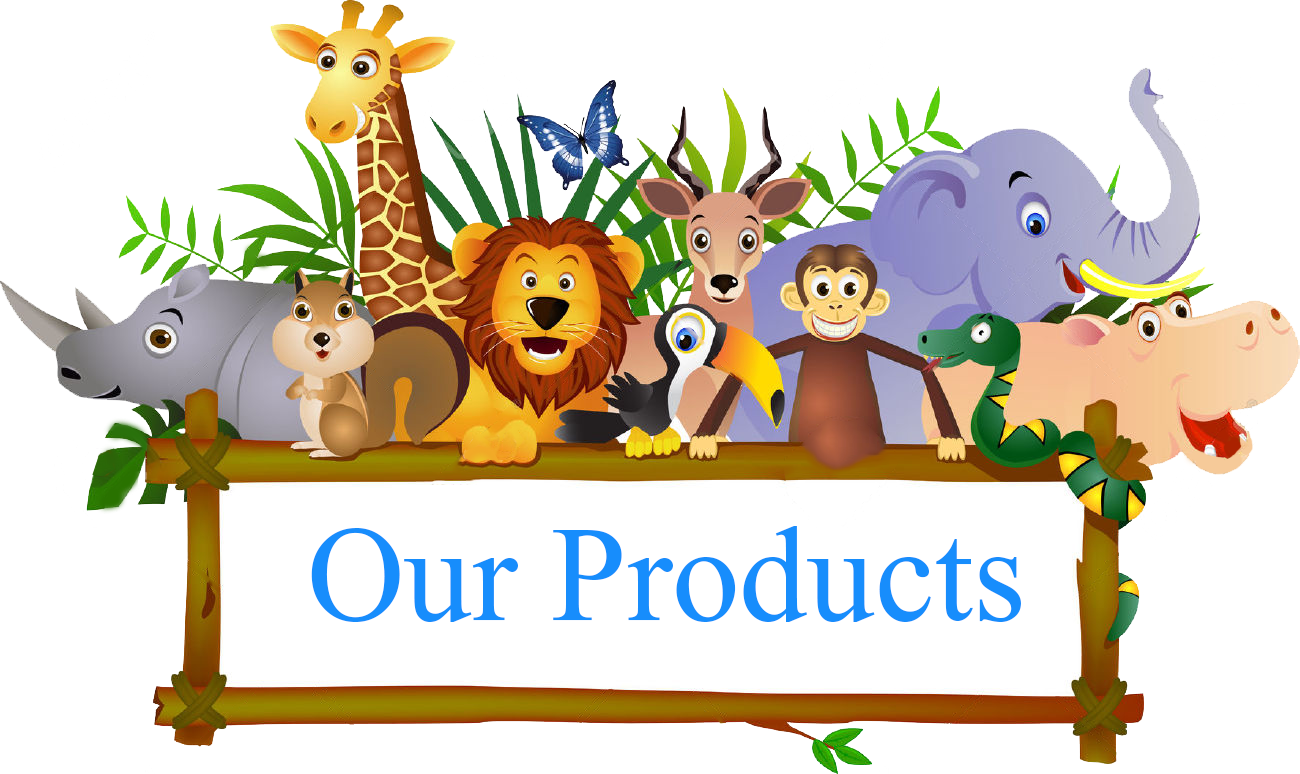
<style>
.page{position:relative;width:1300px;height:774px;background:#ffffff}
.page>*{position:absolute;margin:0}
.t1{font:175px "Kokila";color:#178dfc}
</style>
<div class="page">
<p class="t1" style="left:311px;top:526px;width:710px;height:96px">Our Products</p>
</div>
